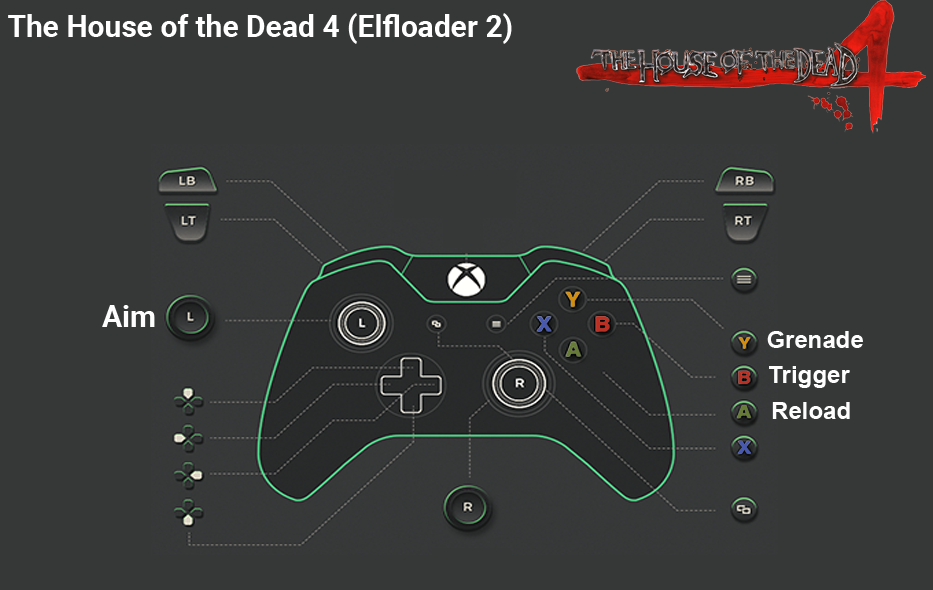
<style>
.page{position:relative;width:933px;height:590px;background:#363838}
.page>*{position:absolute;margin:0}
.t1{font:30px "Roboto-Bold";color:#ffffff}
.t2{font:30px "Roboto-Bold";color:#fefefe}
.t3{font:24px "Arial-BoldMT";color:#fefefe}
</style>
<div class="page">
<p class="t1" style="left:8px;top:13px;width:504px;height:31px">The House of the Dead 4 (Elfloader 2)</p>
<p class="t2" style="left:102px;top:305px;width:53px;height:22px">Aim</p>
<p class="t3" style="left:767px;top:331px;width:96px;height:17px">Grenade</p>
<p class="t3" style="left:769px;top:366px;width:81px;height:22px">Trigger</p>
<p class="t3" style="left:772px;top:402px;width:78px;height:17px">Reload</p>
</div>
